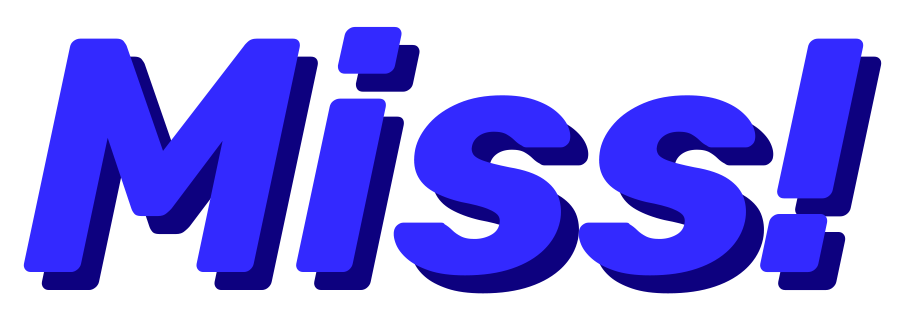
<style>
.page{position:relative;width:905px;height:319px;background:#ffffff}
.page>*{position:absolute;margin:0}
.t1{font:333.3px "Rubik-BoldItalic";color:#3329ff}
.t2{font:333.3px "Rubik-BoldItalic"}
</style>
<div class="page">
<p class="t1" style="left:23px;top:26px;width:841px;height:250px">Miss!!</p>
<p class="t2" style="left:41px;top:44px;width:841px;height:250px">Miss!</p>
</div>
